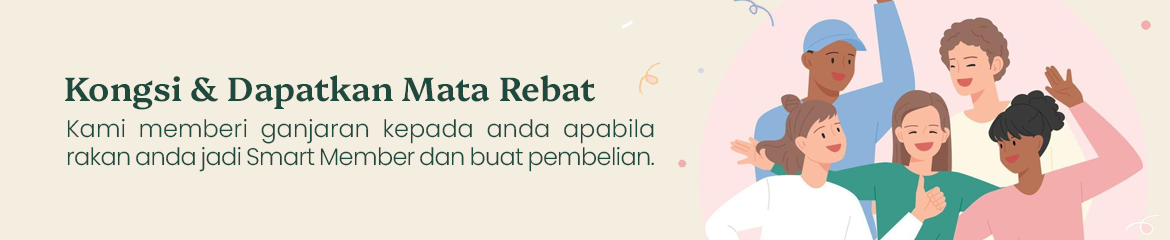
<style>
.page{position:relative;width:1170px;height:240px;background:#f4eee1}
.page>*{position:absolute;margin:0}
.t1{font:33.8px "Platypi-SemiBold";color:#1f493d}
.t2{font:24px "Poppins-Light";color:#1f493d}
</style>
<div class="page">
<p class="t1" style="left:65px;top:75px;width:531px;height:35px">Kongsi &amp; Dapatkan Mata Rebat</p>
<p class="t2" style="left:67px;top:118px;width:587px;height:54px;text-align:justify">Kami memberi ganjaran kepada anda apabila rakan anda jadi Smart Member dan buat pembelian.</p>
</div>
